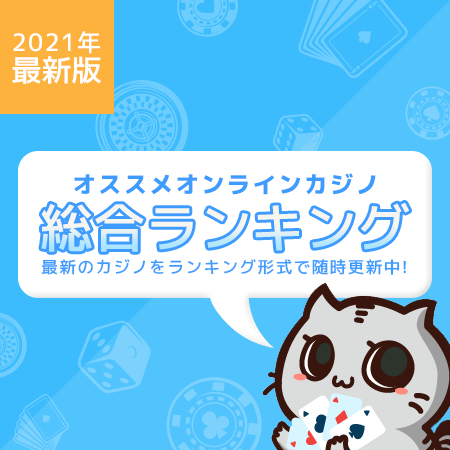
<style>
.page{position:relative;width:450px;height:450px;background:#3dbcfd}
.page>*{position:absolute;margin:0}
.t1{font:24px/30px "mplus-1c-medium";letter-spacing:0.05em;color:#ffffff}
.t2{font:30px/30px "mplus-1c-medium";color:#ffffff}
.t3{font:23.4px "mplus-1c-heavy";letter-spacing:0.1em;color:#3d9cfd}
.t4{font:52.7px "mplus-1c-medium"}
.t5{font:16.4px "mplus-1c-medium";letter-spacing:0.1em;color:#3d9cfd}
</style>
<div class="page">
<p class="t1" style="left:12px;top:31px;width:89px;height:53px">2021年<br><span class="t2">最新版</span></p>
<p class="t3" style="left:74px;top:173px;width:302px;height:22px">オススメオンラインカジノ</p>
<p class="t4" style="left:41px;top:202px;width:369px;height:50px">総合ランキング</p>
<p class="t5" style="left:41px;top:259px;width:365px;height:16px">最新のカジノをランキング形式で随時更新中!</p>
</div>
